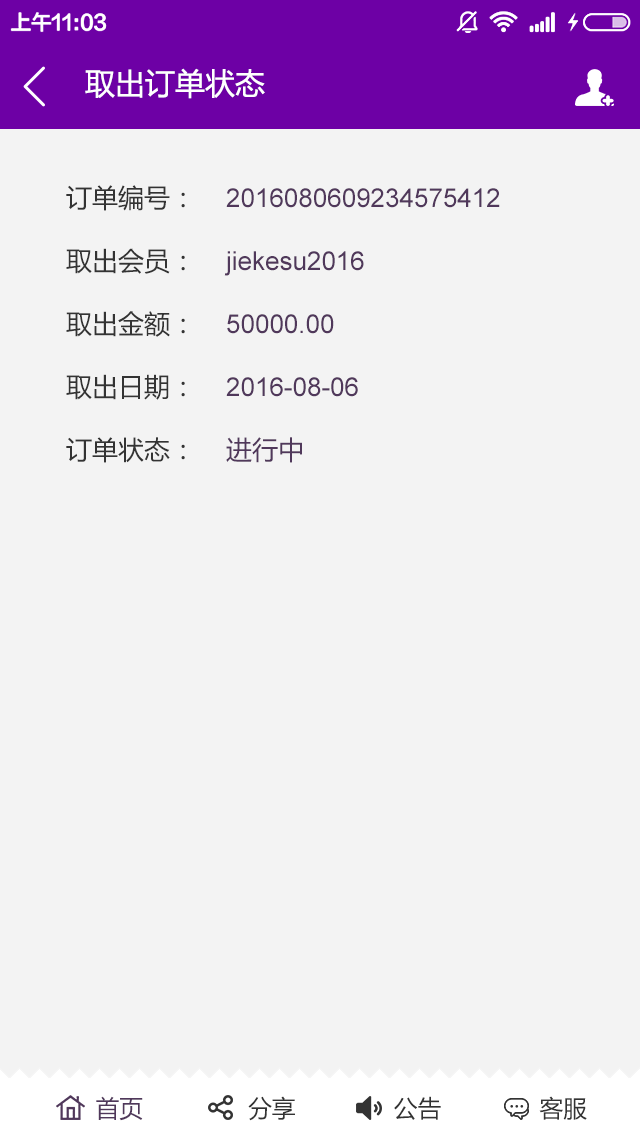
<style>
.page{position:relative;width:640px;height:1136px;background:#f3f3f3}
.page>*{position:absolute;margin:0}
.t1{font:30px "MicrosoftYaHei";color:#ffffff}
.t2{font:26px/63px "MicrosoftYaHei";color:#333333}
.t3{font:26px/63px "ArialMT";color:#50385b}
.t4{font:26px/63px "MicrosoftYaHei";color:#50385b}
.t5{font:24px "MicrosoftYaHei";color:#333333}
.t6{font:24px "MicrosoftYaHei";color:#50385b}
</style>
<div class="page">
<p class="t1" style="left:85px;top:68px;width:180px;height:31px">取出订单状态</p>
<p class="t2" style="left:66px;top:185px;width:119px;height:278px">订单编号：<br>取出会员：<br>取出金额：<br>取出日期：<br>订单状态：</p>
<p class="t3" style="left:224px;top:188px;width:276px;height:275px">2016080609234575412<br>jiekesu2016<br>50000.00<br>2016-08-06<br><span class="t4">进行中</span></p>
<p class="t5" style="left:96px;top:1096px;width:491px;height:25px"><span class="t6">首页</span>               分享              公告              客服</p>
</div>
